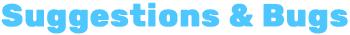
<style>
.page{position:relative;width:350px;height:35px;background:#ffffff}
.page>*{position:absolute;margin:0}
.t1{font:31.4px "Rubik-ExtraBold";letter-spacing:0.02em;color:#4ec7ff;font-weight:bold}
</style>
<div class="page">
<p class="t1" style="left:1px;top:2px;width:347px;height:32px">Suggestions &amp; Bugs</p>
</div>
